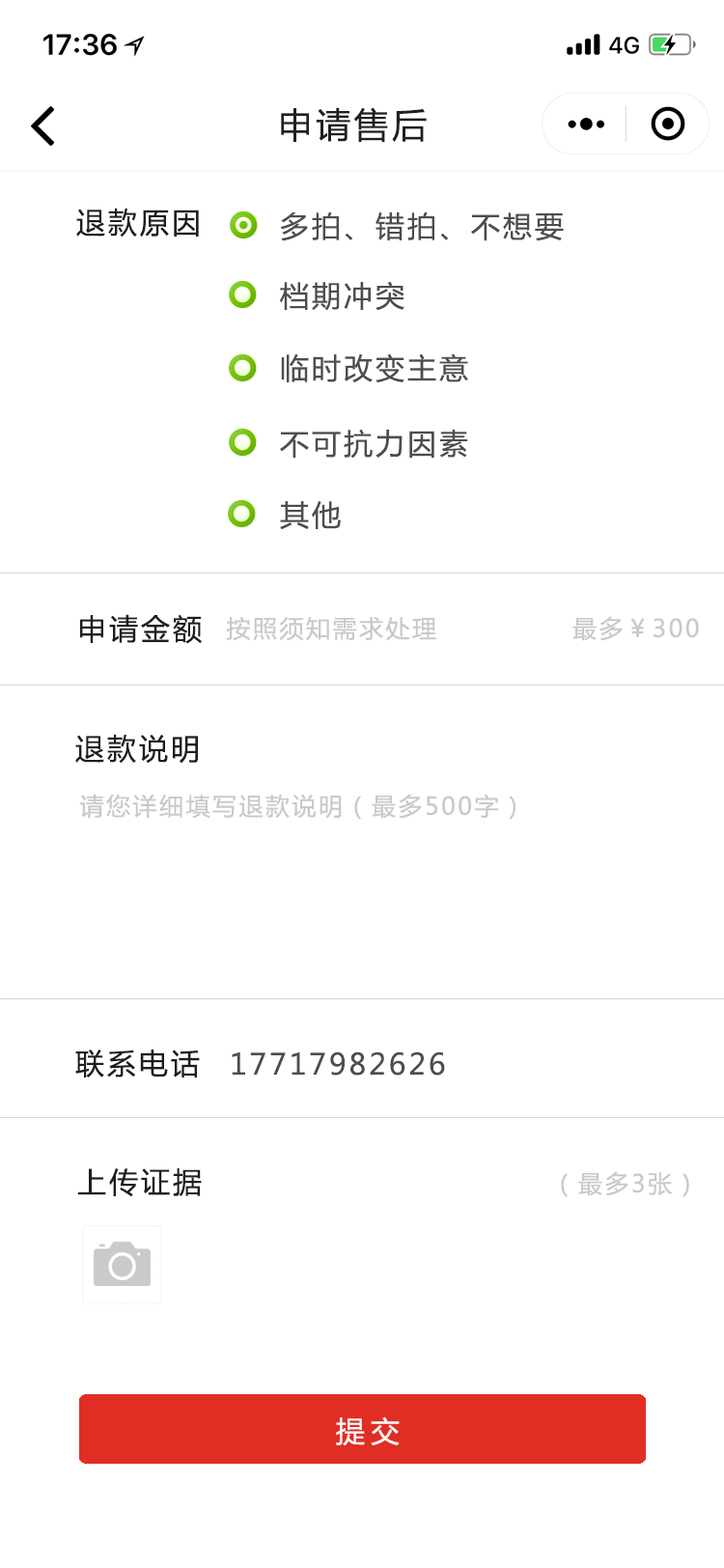
<style>
.page{position:relative;width:724px;height:1568px;background:#ffffff}
.page>*{position:absolute;margin:0}
.t1{font:34.8px "MicrosoftYaHei";letter-spacing:0.1em;color:#201f20}
.t2{font:29px "MicrosoftYaHei";letter-spacing:0.1em;color:#1f1e1e}
.t3{font:29px "MicrosoftYaHei";letter-spacing:0.1em;color:#4e4d4d}
.t4{font:24.1px "MicrosoftYaHei";letter-spacing:0.1em;color:#cac9c9}
.t5{font:29px "MicrosoftYaHei";letter-spacing:0.2em;color:#fcf8f8}
</style>
<div class="page">
<p class="t1" style="left:281px;top:107px;width:146px;height:35px">申请售后</p>
<p class="t2" style="left:76px;top:208px;width:123px;height:30px">退款原因</p>
<p class="t3" style="left:280px;top:211px;width:284px;height:30px">多拍、错拍、不想要</p>
<p class="t3" style="left:280px;top:281px;width:125px;height:30px">档期冲突</p>
<p class="t3" style="left:281px;top:353px;width:187px;height:30px">临时改变主意</p>
<p class="t3" style="left:280px;top:429px;width:188px;height:30px">不可抗力因素</p>
<p class="t3" style="left:280px;top:501px;width:61px;height:29px">其他</p>
<p class="t2" style="left:80px;top:614px;width:122px;height:30px">申请金额</p>
<p class="t4" style="left:226px;top:616px;width:473px;height:25px">按照须知需求处理              最多￥300</p>
<p class="t2" style="left:75px;top:734px;width:123px;height:30px">退款说明</p>
<p class="t4" style="left:79px;top:794px;width:437px;height:26px">请您详细填写退款说明（最多500字）</p>
<p class="t2" style="left:75px;top:1050px;width:125px;height:28px">联系电话</p>
<p class="t3" style="left:232px;top:1051px;width:213px;height:25px">17717982626</p>
<p class="t2" style="left:77px;top:1168px;width:125px;height:29px">上传证据</p>
<p class="t4" style="left:561px;top:1171px;width:128px;height:26px">（最多3张）</p>
<p class="t5" style="left:336px;top:1416px;width:64px;height:29px">提交</p>
</div>
